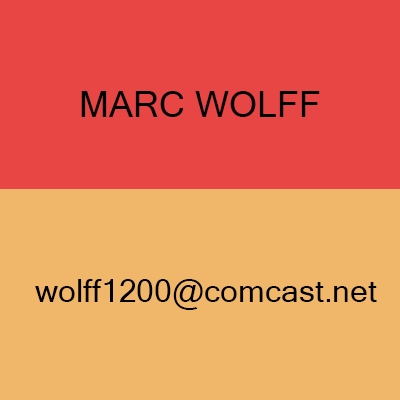
<style>
.page{position:relative;width:400px;height:400px;background:#f0b76b}
.page>*{position:absolute;margin:0}
.t1{font:36px "MicrosoftSansSerif";color:#000000}
.t2{font:32px "MicrosoftSansSerif";color:#000000}
</style>
<div class="page">
<p class="t1" style="left:81px;top:91px;width:239px;height:26px">MARC WOLFF</p>
<p class="t2" style="left:35px;top:279px;width:342px;height:31px">wolff1200@comcast.net</p>
</div>
